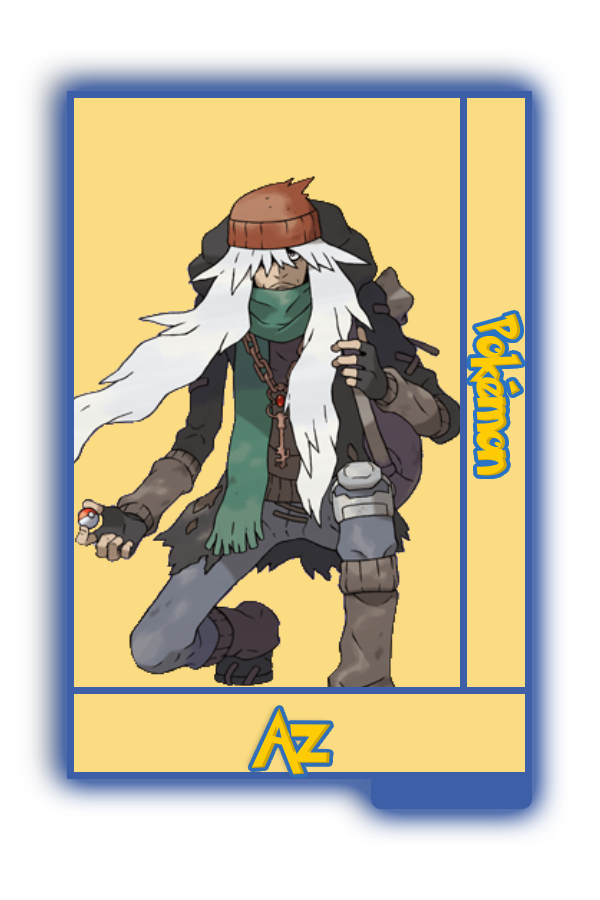
<style>
.page{position:relative;width:600px;height:900px;background:#fbdc83}
.page>*{position:absolute;margin:0}
.t1{font:48.8px "PokemonSolidNormal";color:#ffcb05;scale:0.8 1}
.t2{font:56.6px "PokemonSolidNormal";color:#ffcb05;scale:0.92 1}
</style>
<div class="page">
<p class="t1" style="left:469px;top:313px;width:54px;height:163px;rotate:90deg">Pokémon</p>
<p class="t2" style="left:251px;top:708px;width:80px;height:67px">Az</p>
</div>
